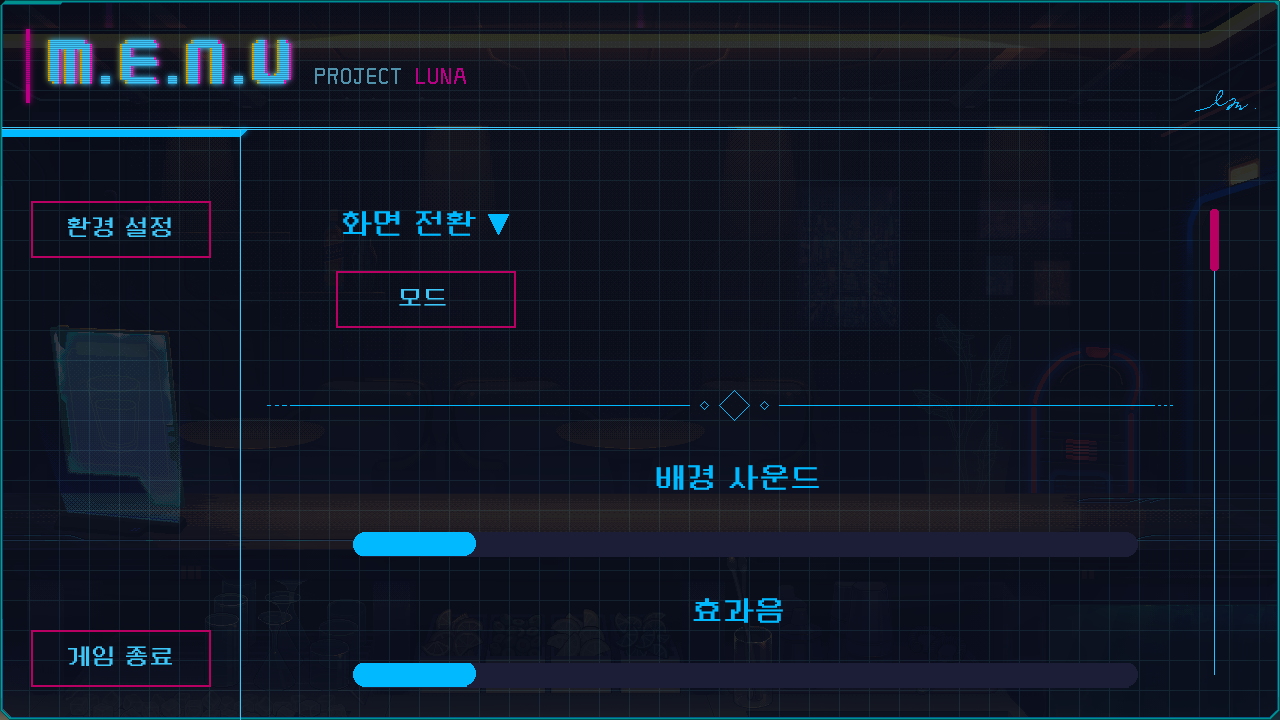
<style>
.page{position:relative;width:1280px;height:720px}
.page>*{position:absolute;margin:0}
.t1{font:24px "NeoDunggeunmoPro-Regular";letter-spacing:0.04em;color:#3ec6f9}
.t2{font:30px "NeoDunggeunmoPro-Regular";letter-spacing:0.04em;color:#00b9ff}
</style>
<div class="page">
<p class="t1" style="left:68px;top:217px;width:103px;height:20px">환경 설정</p>
<p class="t2" style="left:343px;top:211px;width:133px;height:25px">화면 전환</p>
<p class="t1" style="left:399px;top:289px;width:47px;height:17px">모드</p>
<p class="t2" style="left:656px;top:465px;width:163px;height:25px">배경 사운드</p>
<p class="t2" style="left:693px;top:598px;width:90px;height:25px">효과음</p>
<p class="t1" style="left:68px;top:646px;width:104px;height:20px">게임 종료</p>
</div>
